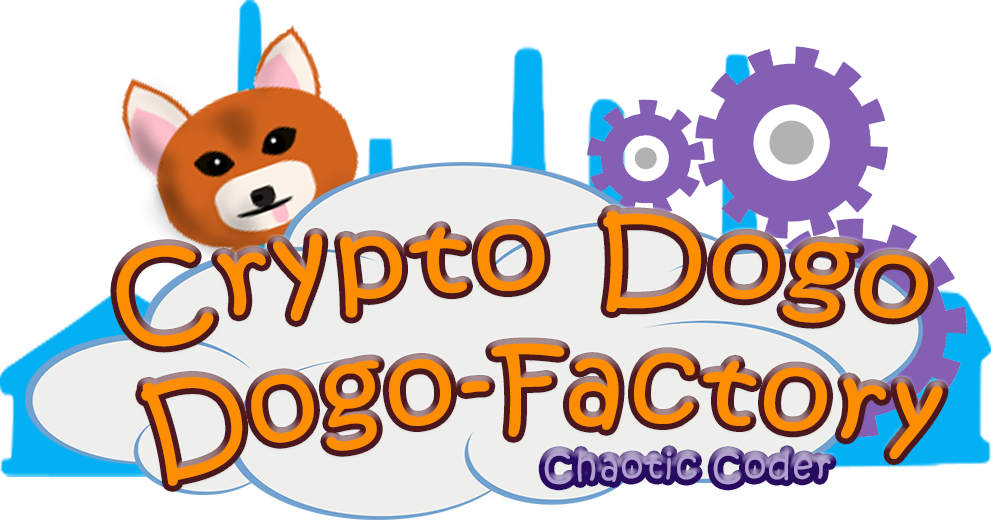
<style>
.page{position:relative;width:991px;height:520px;background:#ffffff}
.page>*{position:absolute;margin:0}
.t1{font:106.9px "KristenITC-Regular";letter-spacing:0.05em;color:#ff8d00}
.t2{font:36px "KristenITC-Regular";letter-spacing:0.05em;color:#b59ed1}
</style>
<div class="page">
<p class="t1" style="left:116px;top:211px;width:827px;height:275px">Crypto Dogo<br>Dogo-Factory</p>
<p class="t2" style="left:544px;top:451px;width:287px;height:34px">Chaotic Coder</p>
</div>
